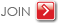
<style>
.page{position:relative;width:58px;height:23px;background:#ffffff}
.page>*{position:absolute;margin:0}
.t1{font:12.9px "CenturyGothic";color:#707070}
</style>
<div class="page">
<p class="t1" style="left:1px;top:7px;width:29px;height:9px">JOIN</p>
</div>
